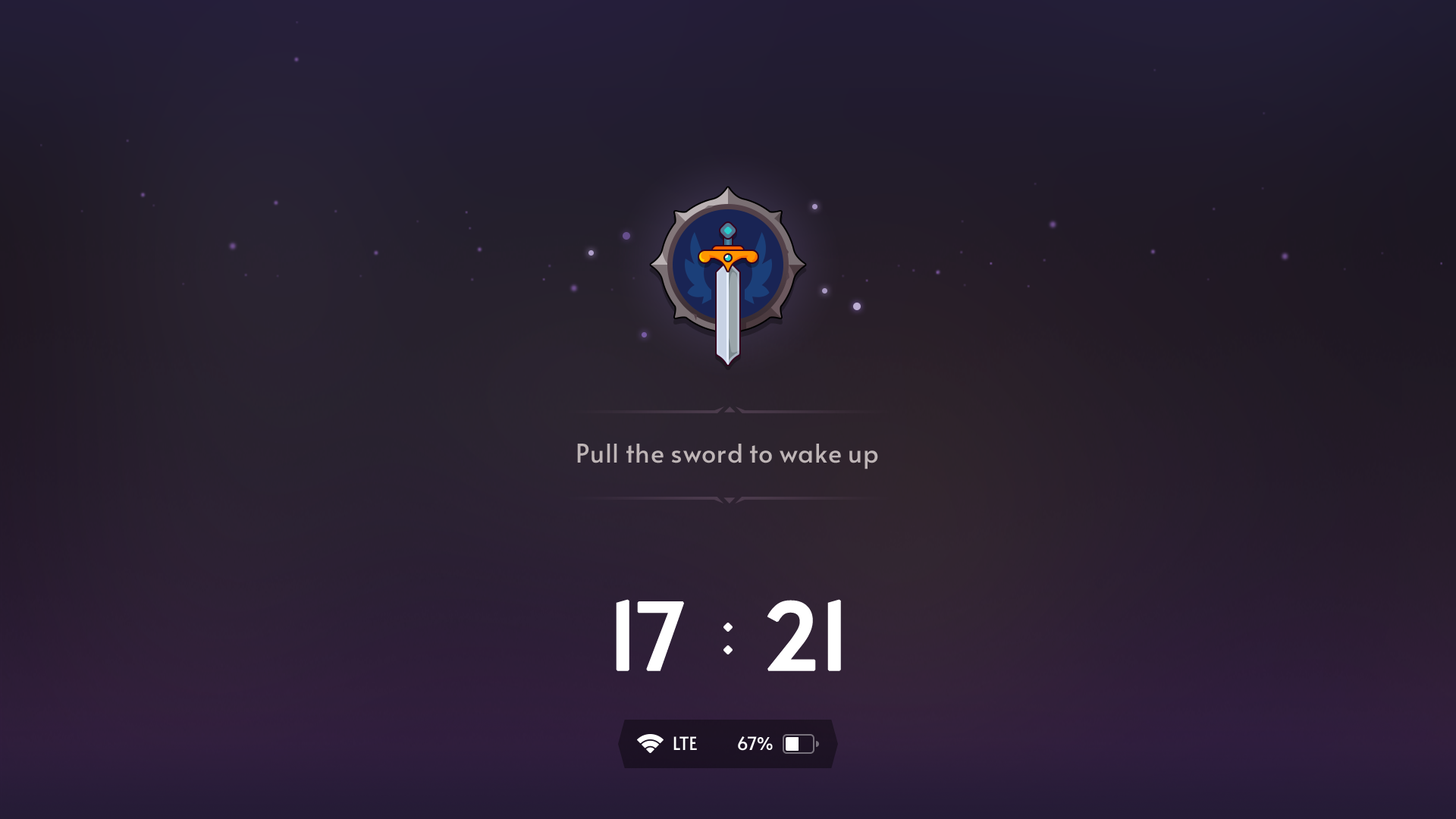
<style>
.page{position:relative;width:1456px;height:819px}
.page>*{position:absolute;margin:0}
.t1{font:25.8px "Alata-Regular";color:#beb5b6}
.t2{font:91px "Alata-Regular";color:#ffffff;font-weight:bold}
.t3{font:18.2px "Alata-Regular";color:#ffffff}
</style>
<div class="page">
<p class="t1" style="left:577px;top:444px;width:301px;height:25px">Pull the sword to wake up</p>
<p class="t2" style="left:616px;top:599px;width:225px;height:72px">17   21</p>
<p class="t3" style="left:673px;top:736px;width:24px;height:14px">LTE</p>
<p class="t3" style="left:738px;top:736px;width:35px;height:15px">67%</p>
</div>
